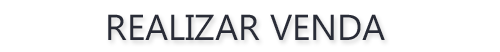
<style>
.page{position:relative;width:500px;height:52px;background:#ffffff}
.page>*{position:absolute;margin:0}
.t1{font:36px "MicrosoftPhagsPa";color:#292c37}
</style>
<div class="page">
<p class="t1" style="left:108px;top:14px;width:277px;height:26px">REALIZAR VENDA</p>
</div>
